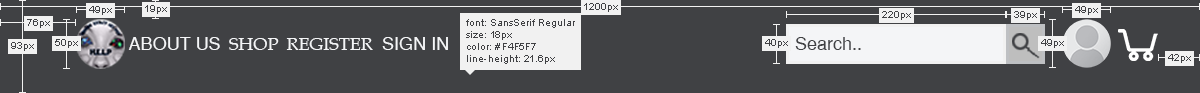
<style>
.page{position:relative;width:1200px;height:93px;background:#404144}
.page>*{position:absolute;margin:0}
.t1{font:10px "ArialMT";color:#404144}
.t2{font:18px "SansSerif";color:#f4f5f7}
.t3{font:18px "BookAntiqua";color:#f4f5f7}
.t4{font:18px "SansSerif";color:#404144}
</style>
<div class="page">
<p class="t1" style="left:89px;top:6px;width:23px;height:9px">49px</p>
<p class="t1" style="left:145px;top:5px;width:22px;height:9px">19px</p>
<p class="t1" style="left:584px;top:3px;width:34px;height:9px">1200px</p>
<p class="t1" style="left:1075px;top:6px;width:23px;height:9px">49px</p>
<p class="t1" style="left:882px;top:11px;width:29px;height:9px">220px</p>
<p class="t1" style="left:1014px;top:11px;width:23px;height:9px">39px</p>
<p class="t1" style="left:27px;top:19px;width:23px;height:9px">76px</p>
<p class="t1" style="left:466px;top:19px;width:109px;height:45px">font: SansSerif Regular<br>size: 18px<br>color: #F4F5F7<br>line-height: 21.6px</p>
<p class="t1" style="left:55px;top:39px;width:23px;height:9px">50px</p>
<p class="t2" style="left:128px;top:37px;width:92px;height:13px">ABOUT US</p>
<p class="t3" style="left:229px;top:38px;width:50px;height:12px">SHOP</p>
<p class="t3" style="left:286px;top:38px;width:87px;height:12px">REGISTER</p>
<p class="t2" style="left:382px;top:37px;width:66px;height:13px">SIGN IN</p>
<p class="t1" style="left:765px;top:39px;width:23px;height:9px">40px</p>
<p class="t4" style="left:795px;top:37px;width:66px;height:13px">Search..</p>
<p class="t1" style="left:1041px;top:39px;width:23px;height:9px">49px</p>
<p class="t1" style="left:11px;top:42px;width:23px;height:9px">93px</p>
<p class="t1" style="left:1168px;top:54px;width:23px;height:9px">42px</p>
</div>
